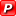
<style>
.page{position:relative;width:16px;height:16px}
.page>*{position:absolute;margin:0}
.t1{font:12px "Verdana-BoldItalic";color:#ffffff}
</style>
<div class="page">
<p class="t1" style="left:3px;top:3px;width:10px;height:10px">P</p>
</div>
